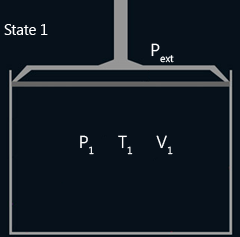
<style>
.page{position:relative;width:240px;height:237px;background:#07111b}
.page>*{position:absolute;margin:0}
.t1{font:25px "SegoeUI";color:#ffffff}
.t2{font:17.4px "SegoeUI";color:#ffffff}
</style>
<div class="page">
<p class="t1" style="left:4px;top:24px;width:44px;height:11px">State 1</p>
<p class="t2" style="left:151px;top:43px;width:23px;height:20px">Pext</p>
<p class="t2" style="left:80px;top:135px;width:93px;height:20px">P1     T1     V1</p>
</div>
